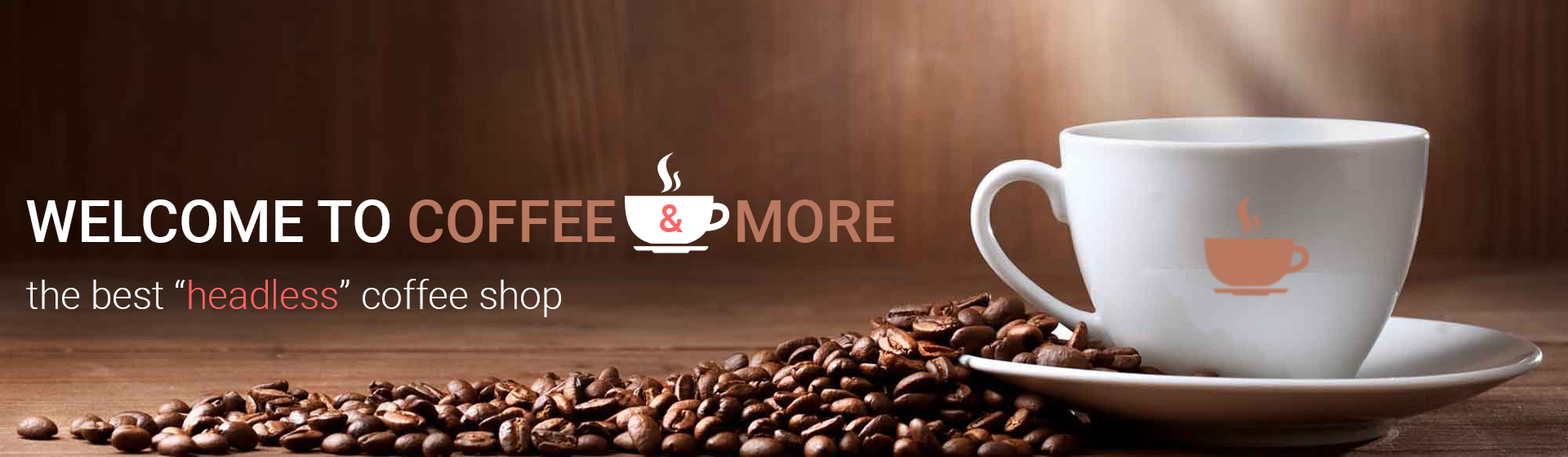
<style>
.page{position:relative;width:1568px;height:457px}
.page>*{position:absolute;margin:0}
.t1{font:58.8px "Roboto-Medium";color:#ffffff}
.t2{font:58.8px "Roboto-Medium";color:#b9785f}
.t3{font:39.2px "Roboto-Medium";color:#ff6464}
.t4{font:39.2px "Roboto-Light";color:#ffffff}
.t5{font:39.2px "Roboto-Light";color:#ff6464}
</style>
<div class="page">
<p class="t1" style="left:26px;top:199px;width:364px;height:44px">WELCOME TO</p>
<p class="t2" style="left:409px;top:199px;width:485px;height:44px">COFFEE        MORE</p>
<p class="t3" style="left:660px;top:204px;width:24px;height:28px">&amp;</p>
<p class="t4" style="left:26px;top:278px;width:535px;height:39px">the best “<span class="t5">headless</span>” coffee shop</p>
</div>
